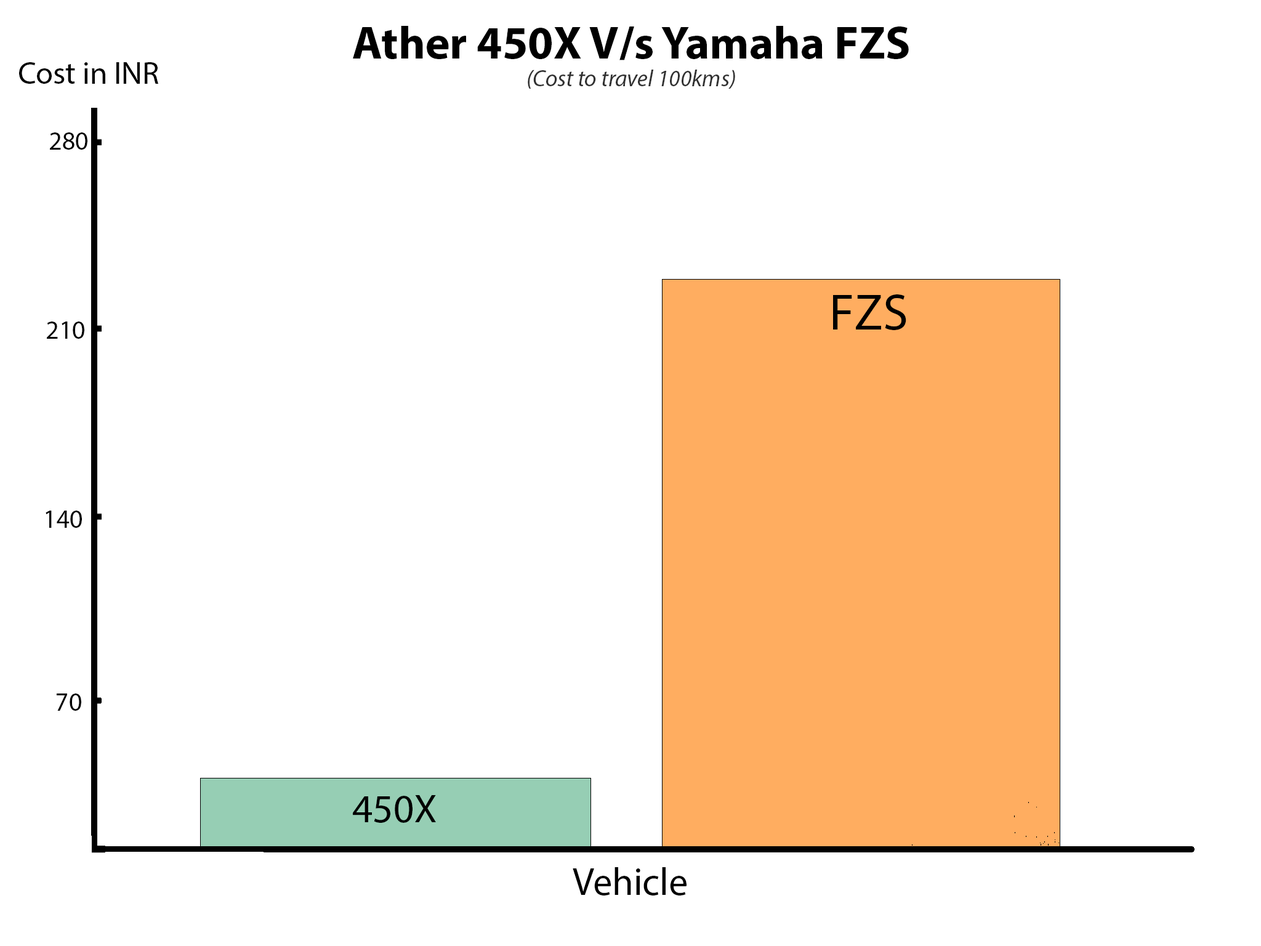
<style>
.page{position:relative;width:1261px;height:946px;background:#ffffff}
.page>*{position:absolute;margin:0}
.t1{font:46.2px "MyriadPro-Bold";color:#000000}
.t2{font:23.1px "MyriadPro-It";color:#313131}
.t3{font:31.4px "MyriadPro-Regular";color:#000000}
.t4{font:25.7px "MyriadPro-Regular";color:#000000}
.t5{font:51.3px "MyriadPro-Regular";color:#000000}
.t6{font:40.2px "MyriadPro-Regular";color:#000000}
.t7{font:38.5px "MyriadPro-Regular";color:#000000}
</style>
<div class="page">
<p class="t1" style="left:353px;top:26px;width:556px;height:63px;text-align:center">Ather 450X V/s Yamaha FZS<br><span class="t2">(Cost to travel 100kms)</span></p>
<p class="t3" style="left:19px;top:62px;width:140px;height:22px">Cost in INR</p>
<p class="t4" style="left:50px;top:132px;width:37px;height:18px">280</p>
<p class="t5" style="left:833px;top:294px;width:73px;height:36px">FZS</p>
<p class="t4" style="left:47px;top:321px;width:37px;height:18px">210</p>
<p class="t4" style="left:46px;top:510px;width:36px;height:18px">140</p>
<p class="t4" style="left:57px;top:693px;width:24px;height:17px">70</p>
<p class="t6" style="left:353px;top:795px;width:83px;height:28px">450X</p>
<p class="t7" style="left:573px;top:867px;width:113px;height:28px">Vehicle</p>
</div>
